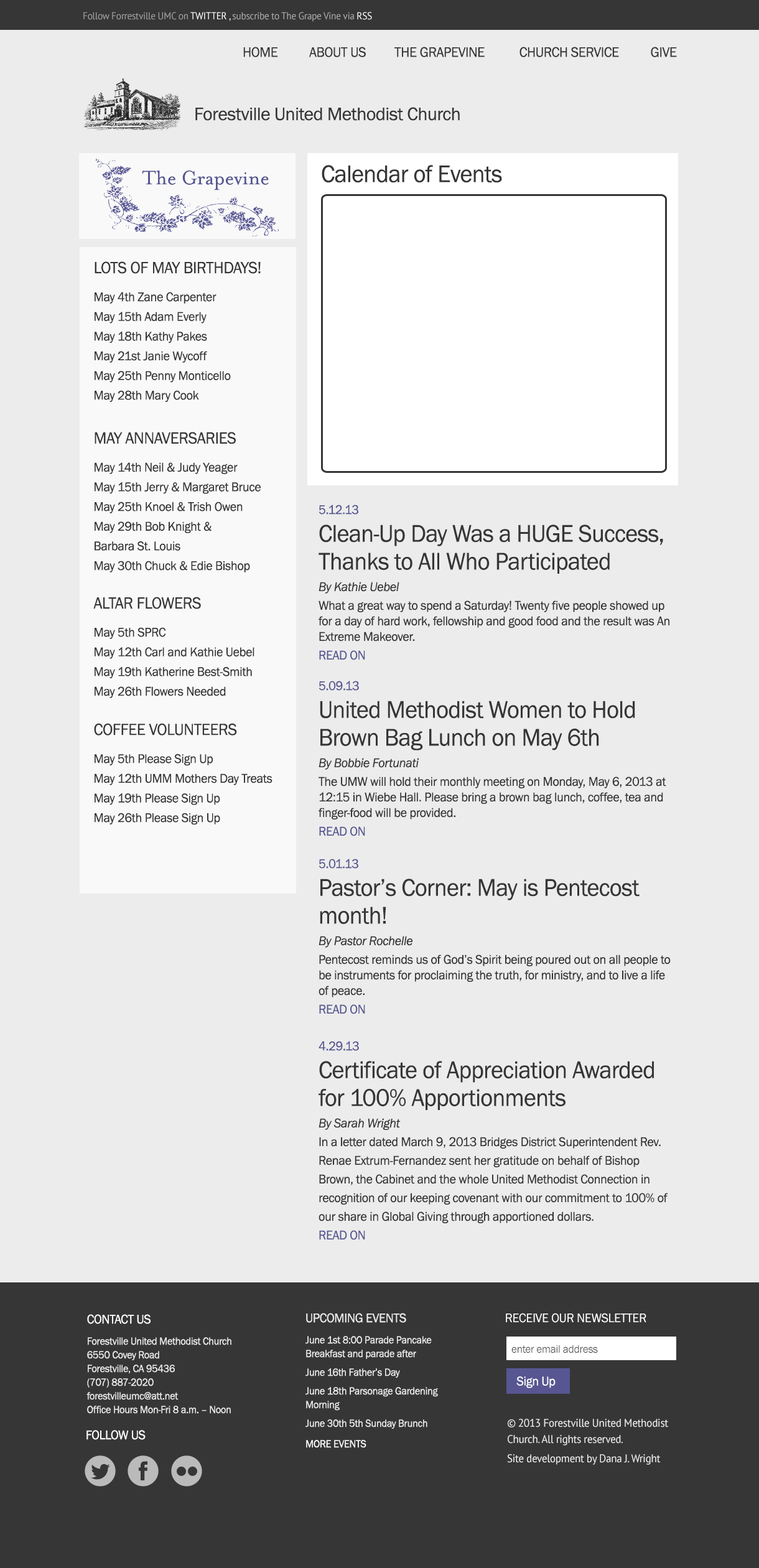
<style>
.page{position:relative;width:759px;height:1568px;background:#ececec}
.page>*{position:absolute;margin:0}
.t1{font:10px "PTSans-Regular";letter-spacing:-0.02em;color:#acacac;scale:0.96 1}
.t2{font:10px "PTSans-Regular";letter-spacing:-0.02em;color:#a1a1a1;scale:0.96 1}
.t3{font:10px "PTSans-Regular";letter-spacing:-0.02em;color:#ffffff;scale:0.96 1}
.t4{font:10px "PTSans-Regular";letter-spacing:-0.02em;color:#ebebeb;scale:0.96 1}
.t5{font:14.3px "FranklinGothic-Book";letter-spacing:-0.02em;color:#363636;scale:0.96 1}
.t6{font:18.7px "FranklinGothic-Book";letter-spacing:-0.02em;color:#363636}
.t7{font:22.4px "MrsEavesOT-Roman";color:#575692;scale:0.96 1}
.t8{font:24.9px "FranklinGothic-Book";letter-spacing:-0.02em;color:#363636;scale:0.96 1}
.t9{font:13.1px/19.7px "FranklinGothic-Book";letter-spacing:-0.02em;color:#363636;scale:0.96 1}
.t10{font:16.8px/22.2px "FranklinGothic-Book";letter-spacing:-0.02em;color:#363636;scale:0.96 1}
.t11{font:13.1px/28px "FranklinGothic-Book";letter-spacing:-0.02em;color:#363636;scale:0.96 1}
.t12{font:16.8px/24.3px "FranklinGothic-Book";letter-spacing:-0.02em;color:#363636;scale:0.96 1}
.t13{font:16.8px/19.3px "FranklinGothic-Book";letter-spacing:-0.02em;color:#363636;scale:0.96 1}
.t14{font:16.8px/19.7px "FranklinGothic-Book";letter-spacing:-0.02em;color:#363636;scale:0.96 1}
.t15{font:13.1px/15.6px "FranklinGothic-Book";letter-spacing:-0.02em;color:#363636;scale:0.96 1}
.t16{font:13.1px/27.8px "FranklinGothic-Book";letter-spacing:-0.02em;color:#575692;scale:0.96 1}
.t17{font:24.9px/27.8px "FranklinGothic-Book";letter-spacing:-0.02em;color:#363636;scale:0.96 1}
.t18{font:13.1px/21.6px "FranklinGothic-BookItalic";letter-spacing:-0.02em;color:#363636;scale:0.96 1}
.t19{font:13.1px/18.7px "FranklinGothic-Book";letter-spacing:-0.02em;color:#363636;scale:0.96 1}
.t20{font:13.1px/18.7px "FranklinGothic-Book";letter-spacing:-0.02em;color:#575692;scale:0.96 1}
.t21{font:10.6px/18.7px "FranklinGothic-Book";letter-spacing:-0.02em;color:#ebebeb;scale:0.96 1}
.t22{font:13.1px/12.4px "FranklinGothic-Book";letter-spacing:-0.02em;color:#ebebeb;scale:0.96 1}
.t23{font:10.6px/21.2px "FranklinGothic-Book";letter-spacing:-0.02em;color:#ebebeb;scale:0.96 1}
.t24{font:10.6px/13.7px "FranklinGothic-Book";letter-spacing:-0.02em;color:#ebebeb;scale:0.96 1}
.t25{font:10.6px/20.5px "FranklinGothic-Book";letter-spacing:-0.02em;color:#ffffff;scale:0.96 1}
.t26{font:13.1px "FranklinGothic-Book";letter-spacing:-0.02em;color:#ffffff;scale:0.96 1}
.t27{font:13.1px/5.4px "FranklinGothic-Book";letter-spacing:-0.02em;color:#ffffff;scale:0.96 1}
.t28{font:11.2px "FranklinGothic-Book";letter-spacing:-0.02em;color:#565659;scale:0.96 1}
.t29{font:11.2px/16.6px "PTSans-Regular";letter-spacing:-0.02em;color:#ebebeb;scale:0.96 1}
.t30{font:11.2px/19.1px "PTSans-Regular";letter-spacing:-0.02em;color:#ebebeb;scale:0.96 1}
</style>
<div class="page">
<p class="t1" style="left:83px;top:12px;width:289px;height:10px"><span class="t2">Follow Forrestville UMC on </span><span class="t3">TWITTER</span><span class="t4"> , </span>subscribe to The Grape Vine via <span class="t3">RSS</span></p>
<p class="t5" style="left:243px;top:47px;width:434px;height:10px">HOME          ABOUT US         THE GRAPEVINE           CHURCH SERVICE          GIVE</p>
<p class="t6" style="left:195px;top:107px;width:265px;height:14px">Forestville United Methodist Church</p>
<p class="t7" style="left:142px;top:170px;width:127px;height:20px">The Grapevine</p>
<p class="t8" style="left:322px;top:165px;width:180px;height:18px">Calendar of Events</p>
<p class="t9" style="left:93px;top:261px;width:180px;height:564px"><span class="t10">LOTS OF MAY BIRTHDAYS!<br></span><span class="t11">May 4th Zane Carpenter<br></span>May 15th Adam Everly<br>May 18th Kathy Pakes<br>May 21st Janie Wycoff<br>May 25th Penny Monticello<br>May 28th Mary Cook<br><br><span class="t12">MAY ANNAVERSARIES<br></span><span class="t11">May 14th Neil &amp; Judy Yeager<br></span>May 15th Jerry &amp; Margaret Bruce<br>May 25th Knoel &amp; Trish Owen<br>May 29th Bob Knight &amp;<br>Barbara St. Louis<br>May 30th Chuck &amp; Edie Bishop<br><span class="t13"><br>ALTAR FLOWERS<br></span><span class="t11">May 5th SPRC<br></span>May 12th Carl and Kathie Uebel<br>May 19th Katherine Best-Smith<br>May 26th Flowers Needed<br><br><span class="t14">COFFEE VOLUNTEERS<br></span><span class="t11">May 5th Please Sign Up<br></span>May 12th UMM Mothers Day Treats<br>May 19th Please Sign Up<br>May 26th Please Sign Up</p>
<p class="t15" style="left:319px;top:505px;width:351px;height:155px"><span class="t16">5.12.13<br></span><span class="t17">Clean-Up Day Was a HUGE Success, Thanks to All Who Participated<br></span><span class="t18">By Kathie Uebel<br></span><span class="t19">What a great way to spend a Saturday! Twenty five </span>people showed up for a day of hard work, fellowship and good food and the result was An Extreme Makeover. <br><span class="t20">READ ON</span></p>
<p class="t15" style="left:319px;top:681px;width:347px;height:155px"><span class="t16">5.09.13<br></span><span class="t17">United Methodist Women to Hold Brown Bag Lunch on May 6th<br></span><span class="t18">By Bobbie Fortunati<br></span><span class="t19">The UMW will hold their monthly meeting on </span>Monday, May 6, 2013 at 12:15 in Wiebe Hall. Please bring a brown bag lunch, coffee, tea and<br>finger-food will be provided.<br><span class="t20">READ ON</span></p>
<p class="t15" style="left:319px;top:859px;width:352px;height:155px"><span class="t16">5.01.13<br></span><span class="t17">Pastor’s Corner: May is Pentecost month! <br></span><span class="t18">By Pastor Rochelle<br></span><span class="t19">Pentecost reminds us of God’s Spirit being poured out on all people to </span>be instruments for proclaiming the truth, for ministry, and to live a life of peace.<br><span class="t20">READ ON</span></p>
<p class="t19" style="left:319px;top:1041px;width:349px;height:199px"><span class="t16">4.29.13<br></span><span class="t17">Certificate of Appreciation Awarded for 100% Apportionments <br></span><span class="t18">By Sarah Wright<br></span>In a letter dated March 9, 2013 Bridges District Superintendent Rev. Renae Extrum-Fernandez sent her gratitude on behalf of Bishop Brown, the Cabinet and the whole United Methodist Connection in recognition of our keeping covenant with our commitment to 100% of our share in Global Giving through apportioned dollars.<br><span class="t20">READ ON</span></p>
<p class="t21" style="left:306px;top:1313px;width:132px;height:135px"><span class="t22">UPCOMING EVENTS<br></span><span class="t23">June 1st 8:00 Parade Pancake </span><span class="t24">Breakfast and parade after<br></span>June 16th Father’s Day<br>June 18th Parsonage Gardening<br><span class="t24">Morning<br></span>June 30th 5th Sunday Brunch<br><span class="t25">MORE EVENTS</span></p>
<p class="t26" style="left:506px;top:1313px;width:140px;height:10px">RECEIVE OUR NEWSLETTER</p>
<p class="t24" style="left:86px;top:1314px;width:145px;height:100px"><span class="t27">CONTACT US<br></span><span class="t23">Forestville United Methodist Church<br></span>6550 Covey Road<br>Forestville, CA 95436<br>(707) 887-2020<br>forestvilleumc@att.net<br>Office Hours Mon-Fri 8 a.m. – Noon</p>
<p class="t28" style="left:511px;top:1345px;width:87px;height:8px">enter email address</p>
<p class="t26" style="left:516px;top:1376px;width:40px;height:12px">Sign Up</p>
<p class="t29" style="left:507px;top:1419px;width:161px;height:46px">© 2013 Forestville United Methodist Church. All rights reserved.  <br><span class="t30">Site development by Dana J. Wright</span></p>
<p class="t26" style="left:86px;top:1430px;width:60px;height:10px">FOLLOW US</p>
</div>
